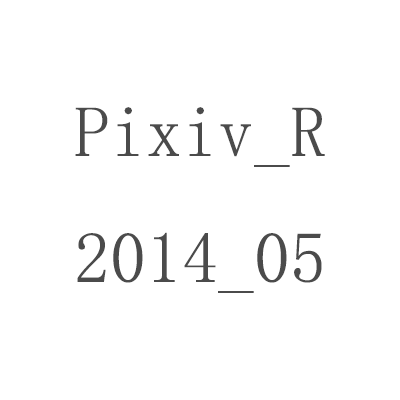
<style>
.page{position:relative;width:400px;height:400px;background:#ffffff}
.page>*{position:absolute;margin:0}
.t1{font:72px "SimSun";color:#4b4b4b}
</style>
<div class="page">
<p class="t1" style="left:75px;top:107px;width:250px;height:186px">Pixiv_R<br>2014_05</p>
</div>
